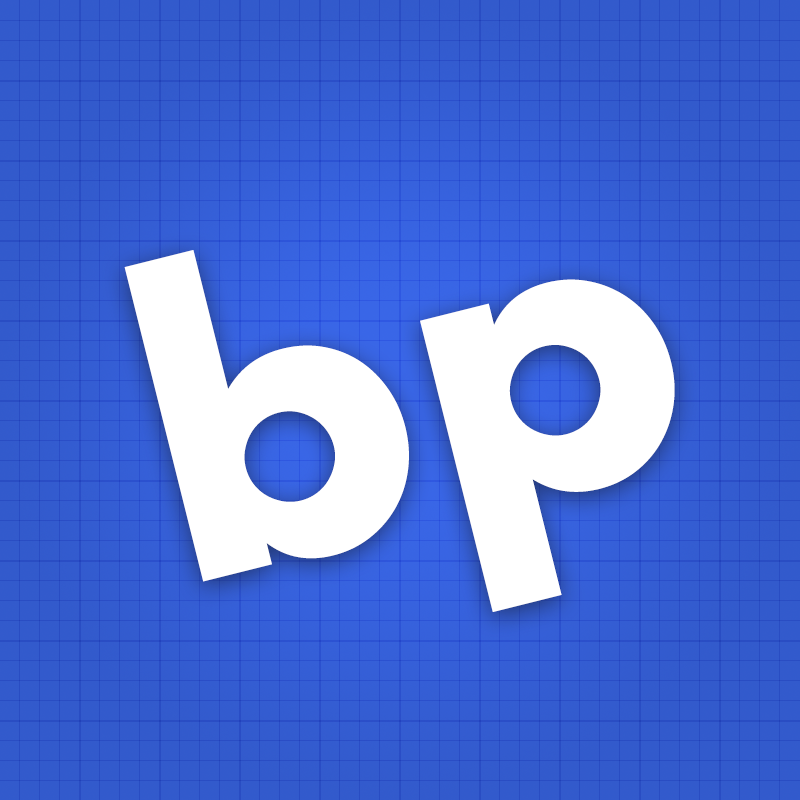
<style>
.page{position:relative;width:800px;height:800px}
.page>*{position:absolute;margin:0}
.t1{font:390.2px "Futura-Bold";color:#ffffff}
</style>
<div class="page">
<p class="t1" style="left:124px;top:250px;width:551px;height:362px;rotate:-14deg">bp</p>
</div>
